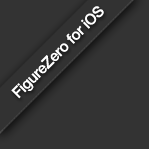
<style>
.page{position:relative;width:149px;height:149px;background:#333333}
.page>*{position:absolute;margin:0}
.t1{font:15.2px "HelveticaNeue-Medium";letter-spacing:-0.025em;color:#ffffff}
</style>
<div class="page">
<p class="t1" style="left:11px;top:6px;width:93px;height:93px;rotate:-45deg">FigureZero for iOS</p>
</div>
